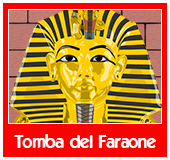
<style>
.page{position:relative;width:170px;height:160px;background:#ff0000}
.page>*{position:absolute;margin:0}
.t1{font:18px "ELEGANCE";color:#ffffff}
</style>
<div class="page">
<p class="t1" style="left:14px;top:134px;width:142px;height:14px">Tomba del Faraone</p>
</div>
